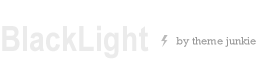
<style>
.page{position:relative;width:280px;height:80px;background:#ffffff}
.page>*{position:absolute;margin:0}
.t1{font:35px "ArialNarrow-Bold";color:#ebebeb}
.t2{font:11px "Rockwell";color:#999999}
</style>
<div class="page">
<p class="t1" style="left:2px;top:25px;width:147px;height:34px">BlackLight</p>
<p class="t2" style="left:176px;top:37px;width:80px;height:10px">by theme junkie</p>
</div>
